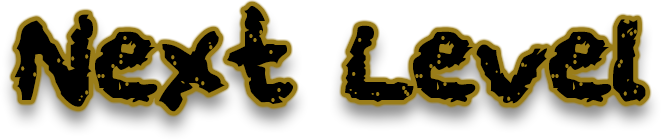
<style>
.page{position:relative;width:661px;height:140px;background:#ffffff}
.page>*{position:absolute;margin:0}
.t1{font:100px "squeakychalksound";color:#000000}
</style>
<div class="page">
<p class="t1" style="left:14px;top:6px;width:632px;height:106px">Next Level</p>
</div>
